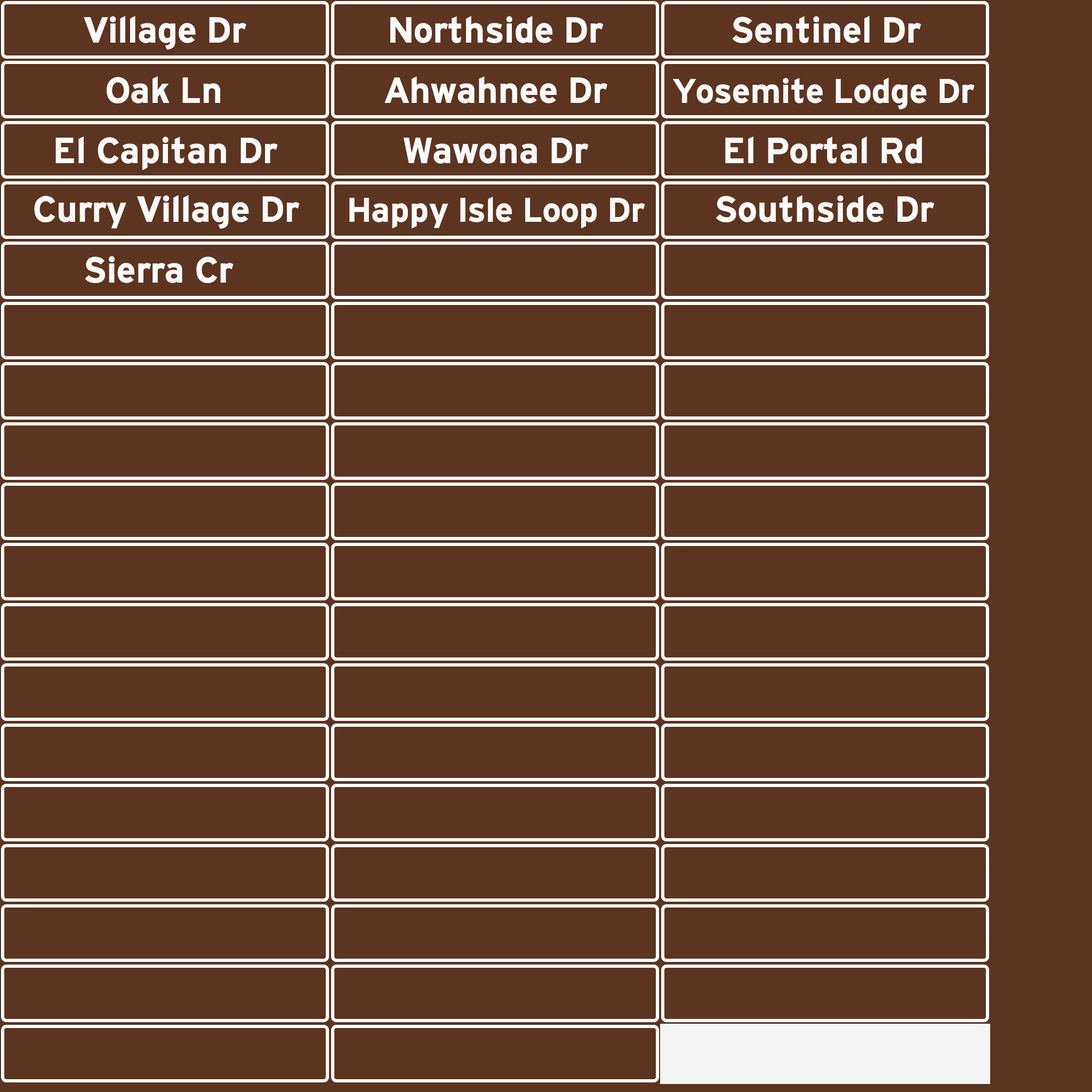
<style>
.page{position:relative;width:1092px;height:1092px;background:#5c3420}
.page>*{position:absolute;margin:0}
.t1{font:38.4px "HittheRoad";color:#fbfbfb}
.t2{font:36.3px "HittheRoad";color:#fbfbfb}
</style>
<div class="page">
<p class="t1" style="left:84px;top:16px;width:162px;height:34px">Village Dr</p>
<p class="t1" style="left:390px;top:16px;width:213px;height:27px">Northside Dr</p>
<p class="t1" style="left:733px;top:16px;width:188px;height:27px">Sentinel Dr</p>
<p class="t1" style="left:107px;top:76px;width:113px;height:27px">Oak Ln</p>
<p class="t1" style="left:384px;top:76px;width:223px;height:27px">Ahwahnee Dr</p>
<p class="t2" style="left:672px;top:78px;width:303px;height:32px">Yosemite Lodge Dr</p>
<p class="t1" style="left:55px;top:136px;width:223px;height:35px">El Capitan Dr</p>
<p class="t1" style="left:404px;top:138px;width:185px;height:26px">Wawona Dr</p>
<p class="t1" style="left:725px;top:136px;width:197px;height:28px">El Portal Rd</p>
<p class="t1" style="left:34px;top:195px;width:266px;height:34px">Curry Village Dr</p>
<p class="t2" style="left:349px;top:196px;width:296px;height:33px">Happy Isle Loop Dr</p>
<p class="t1" style="left:716px;top:195px;width:218px;height:27px">Southside Dr</p>
<p class="t1" style="left:85px;top:256px;width:149px;height:27px">Sierra Cr</p>
</div>
